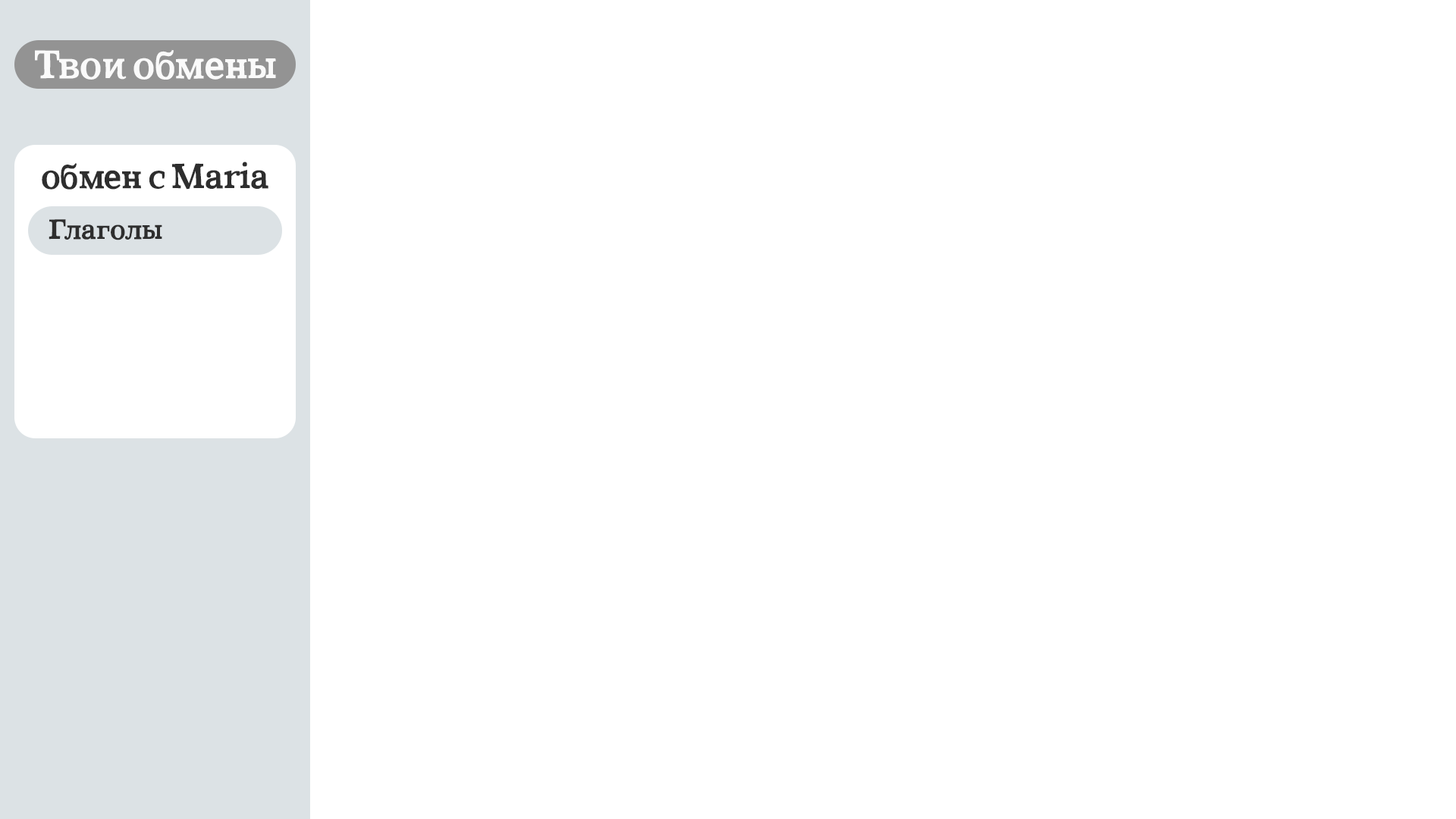
<style>
.page{position:relative;width:1456px;height:819px;background:#ffffff}
.page>*{position:absolute;margin:0}
.t1{font:38.7px "CoatsBold-Bold";color:#fafafa}
.t2{font:34.1px "CoatsBold-Bold";color:#2e2e2e}
.t3{font:27.3px "CoatsBold-Bold";color:#2e2e2e}
</style>
<div class="page">
<p class="t1" style="left:35px;top:49px;width:241px;height:31px">Твои обмены</p>
<p class="t2" style="left:42px;top:162px;width:226px;height:28px">обмен с Maria</p>
<p class="t3" style="left:49px;top:219px;width:113px;height:21px">Глаголы</p>
</div>
